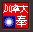
<style>
.page{position:relative;width:33px;height:32px;background:#f20000}
.page>*{position:absolute;margin:0}
.t1{font:10.4px "SimSun";letter-spacing:-0.25em;color:#ffffff}
.t2{font:11.7px "SimSun";color:#ffffff}
</style>
<div class="page">
<p class="t1" style="left:3px;top:4px;width:25px;height:9px">加拿大</p>
<p class="t2" style="left:16px;top:15px;width:11px;height:12px">奉</p>
</div>
